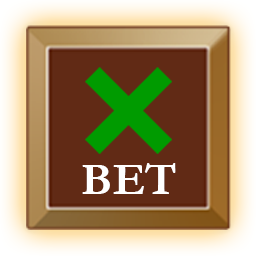
<style>
.page{position:relative;width:256px;height:256px;background:#612a15}
.page>*{position:absolute;margin:0}
.t1{font:45.8px "Garamond-Bold";color:#ffffff}
</style>
<div class="page">
<p class="t1" style="left:82px;top:163px;width:94px;height:31px">BET</p>
</div>
